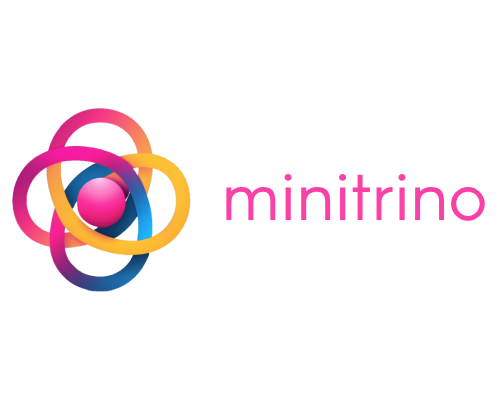
<style>
.page{position:relative;width:500px;height:400px;background:#ffffff}
.page>*{position:absolute;margin:0}
.t1{font:74px "Arcon-Regular";color:#fa41a8}
</style>
<div class="page">
<p class="t1" style="left:226px;top:173px;width:259px;height:48px">minitrino</p>
</div>
